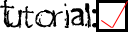
<style>
.page{position:relative;width:128px;height:32px;background:#ffffff}
.page>*{position:absolute;margin:0}
.t1{font:36px "OneWayRegular";color:#000000}
</style>
<div class="page">
<p class="t1" style="left:0px;top:0px;width:98px;height:29px">Tutorial:</p>
</div>
